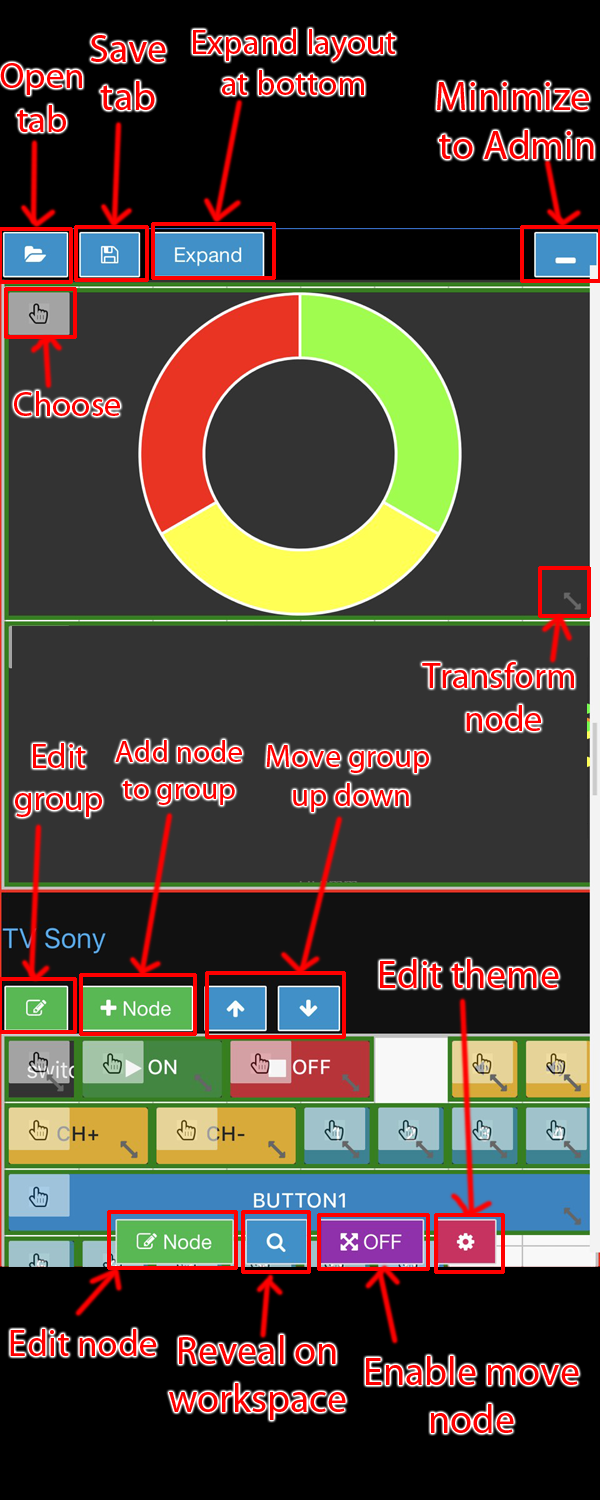
<style>
.page{position:relative;width:600px;height:1500px;background:#333333}
.page>*{position:absolute;margin:0}
.t1{font:34.7px "MyriadPro-Regular";color:#ff0000}
.t2{font:40px "MyriadPro-Regular";color:#ff0000}
.t3{font:37.1px "MyriadPro-Regular";color:#ff0000}
.t4{font:40.6px "MyriadPro-Regular";color:#ff0000}
.t5{font:34.8px "MyriadPro-Regular";color:#ff0000}
.t6{font:36.3px "MyriadPro-Regular";color:#ff0000}
.t7{font:34.9px "MyriadPro-Regular";color:#ff0000}
.t8{font:31.2px "MyriadPro-Regular";color:#ff0000}
.t9{font:32.3px "MyriadPro-Regular";color:#ff0000}
.t10{font:37.2px "MyriadPro-Regular";color:#ff0000}
</style>
<div class="page">
<p class="t1" style="left:193px;top:29px;width:203px;height:66px;text-align:center">Expand layout<br>at bottom</p>
<p class="t2" style="left:91px;top:35px;width:75px;height:75px;text-align:center">Save<br>tab</p>
<p class="t3" style="left:0px;top:63px;width:82px;height:69px;text-align:center">Open<br>tab</p>
<p class="t4" style="left:437px;top:82px;width:157px;height:77px;text-align:center">Minimize <br>to Admin</p>
<p class="t5" style="left:14px;top:391px;width:106px;height:25px">Choose</p>
<p class="t6" style="left:422px;top:662px;width:152px;height:69px;text-align:center">Transform <br>node</p>
<p class="t7" style="left:15px;top:743px;width:87px;height:74px;text-align:center">Edit<br>group</p>
<p class="t8" style="left:115px;top:740px;width:127px;height:65px;text-align:center">Add node<br>to group</p>
<p class="t9" style="left:266px;top:745px;width:163px;height:67px;text-align:center">Move group <br>up down</p>
<p class="t2" style="left:380px;top:959px;width:179px;height:29px">Edit theme</p>
<p class="t10" style="left:10px;top:1329px;width:147px;height:27px">Edit node</p>
<p class="t2" style="left:169px;top:1335px;width:177px;height:85px;text-align:center">Reveal on<br>workspace</p>
<p class="t2" style="left:366px;top:1356px;width:213px;height:77px;text-align:center">Enable move<br>node</p>
</div>
